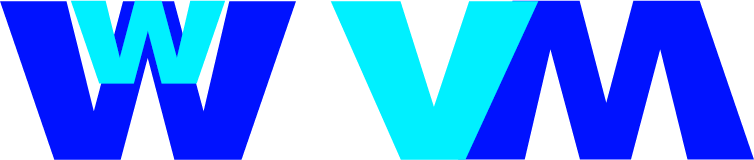
<style>
.page{position:relative;width:754px;height:160px;background:#0012ff}
.page>*{position:absolute;margin:0}
.t1{font:219.3px "Swiss721BT-BlackExtended";letter-spacing:0.05em;color:#0012ff}
.t2{font:114px "Swiss721BT-BlackExtended";letter-spacing:0.05em;color:#00f0ff}
.t3{font:219.3px "Swiss721BT-BlackExtended";letter-spacing:0.05em;color:#00f0ff}
.t4{font:219.7px "Swiss721BT-BlackExtended";letter-spacing:0.05em;color:#0012ff}
</style>
<div class="page">
<p class="t1" style="left:0px;top:1px;width:296px;height:159px">W</p>
<p class="t2" style="left:71px;top:0px;width:154px;height:84px">W</p>
<p class="t3" style="left:330px;top:1px;width:209px;height:159px">V</p>
<p class="t4" style="left:458px;top:0px;width:296px;height:160px;rotate:180deg">W</p>
</div>
